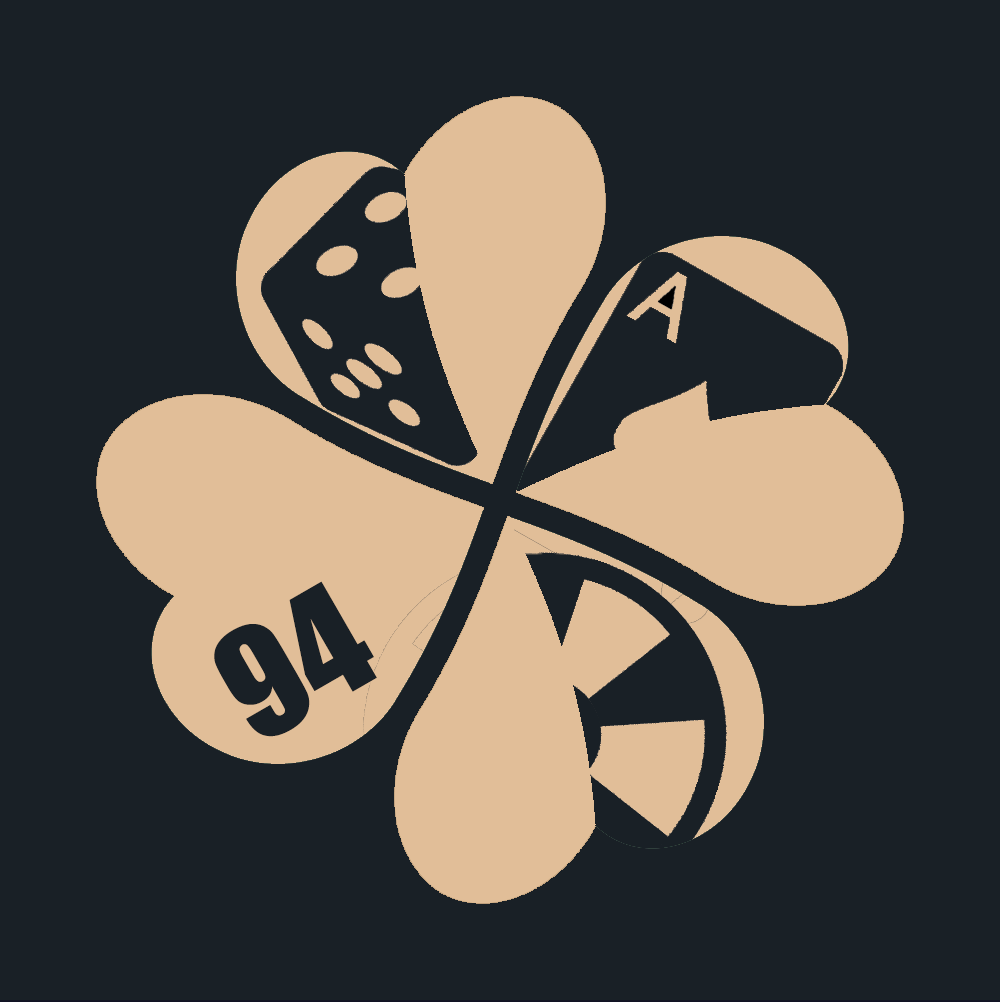
<style>
.page{position:relative;width:1000px;height:1002px;background:#192026}
.page>*{position:absolute;margin:0}
.t1{font:140px "Impact";letter-spacing:0.01em;color:#192026}
</style>
<div class="page">
<p class="t1" style="left:214px;top:581px;width:163px;height:156px;rotate:-30deg">94</p>
</div>
